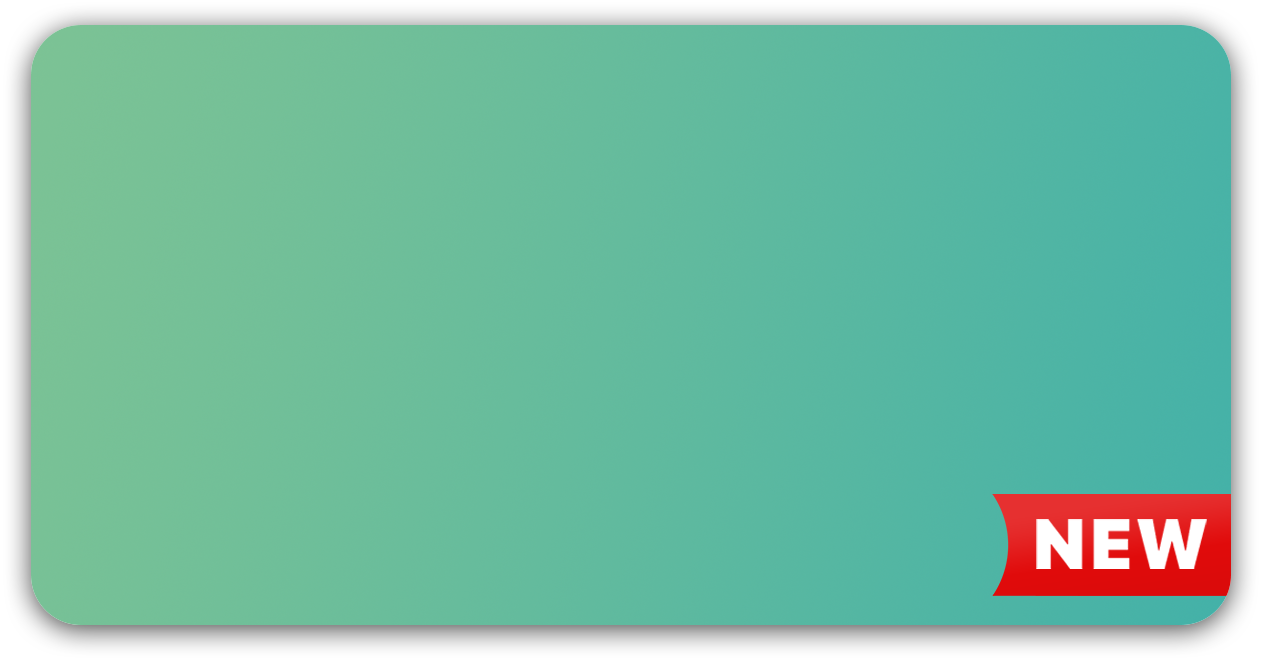
<style>
.page{position:relative;width:1263px;height:660px}
.page>*{position:absolute;margin:0}
.t1{font:71.6px "SFProText-Black";color:#ffffff}
</style>
<div class="page">
<p class="t1" style="left:1036px;top:519px;width:171px;height:50px">NEW</p>
</div>
